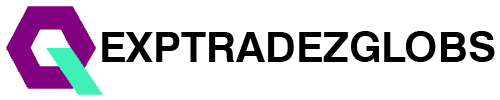
<style>
.page{position:relative;width:500px;height:100px;background:#ffffff}
.page>*{position:absolute;margin:0}
.t1{font:41.6px "Swiss721BT-Bold";color:#000000;text-transform:uppercase}
</style>
<div class="page">
<p class="t1" style="left:102px;top:31px;width:393px;height:31px">Exptradezglobs</p>
</div>
